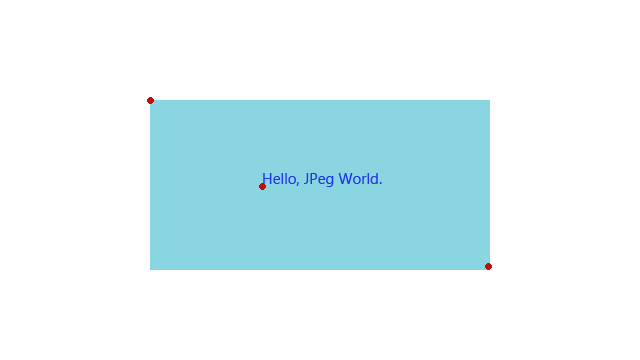
<style>
.page{position:relative;width:640px;height:360px;background:#ffffff}
.page>*{position:absolute;margin:0}
.t1{font:15px "SegoeUI";color:#2138e2}
</style>
<div class="page">
<p class="t1" style="left:263px;top:173px;width:119px;height:14px">Hello, JPeg World.</p>
</div>
